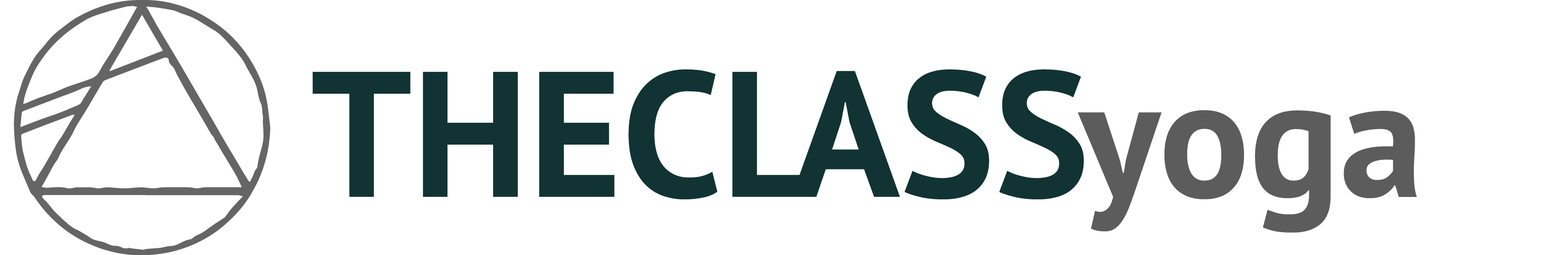
<style>
.page{position:relative;width:1568px;height:255px;background:#ffffff}
.page>*{position:absolute;margin:0}
.t1{font:178.7px "PTSans-Bold";color:#113333}
.t2{font:139px "PTSans-Bold";color:#113333}
.t3{font:168.7px "PTSans-Bold";color:#5c5c5c}
</style>
<div class="page">
<p class="t1" style="left:313px;top:69px;width:771px;height:131px"><span class="t2"> </span>THECLASS</p>
<p class="t3" style="left:1078px;top:110px;width:339px;height:123px">yoga</p>
</div>
